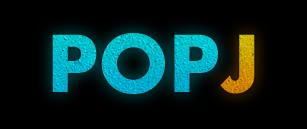
<style>
.page{position:relative;width:307px;height:129px;background:#000000}
.page>*{position:absolute;margin:0}
.t1{font:86px "Aharoni-Bold"}
</style>
<div class="page">
<p class="t1" style="left:52px;top:33px;width:203px;height:61px">POPJ</p>
</div>
